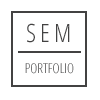
<style>
.page{position:relative;width:100px;height:100px;background:#ffffff}
.page>*{position:absolute;margin:0}
.t1{font:25.1px "OpenSans-CondensedLight";letter-spacing:0.17em;color:#434242}
.t2{font:13.5px "OpenSans-CondensedLight"}
</style>
<div class="page">
<p class="t1" style="left:27px;top:23px;width:43px;height:20px">SEM</p>
<p class="t2" style="left:25px;top:63px;width:49px;height:11px">PORTFOLIO</p>
</div>
